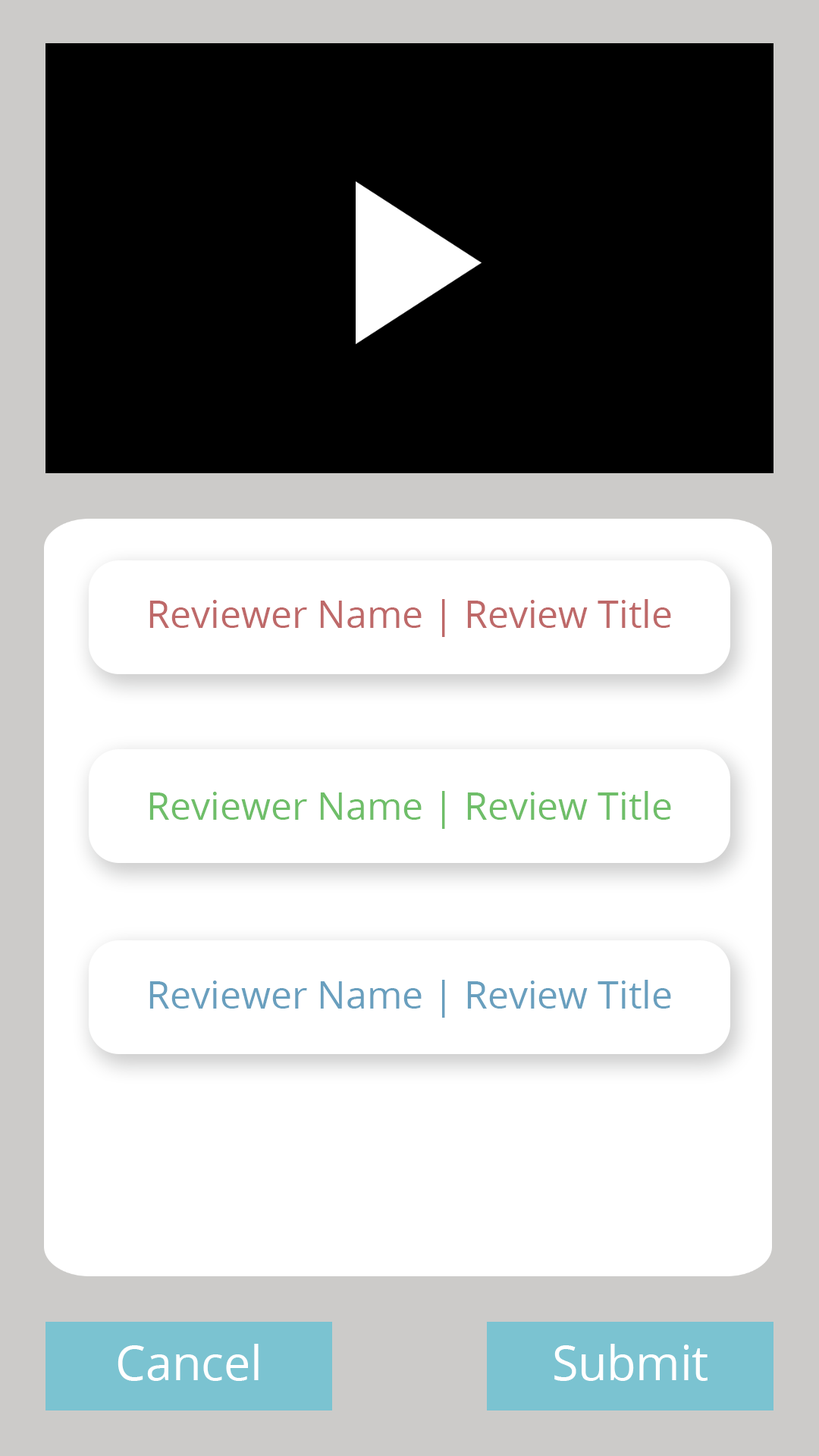
<style>
.page{position:relative;width:819px;height:1456px;background:#ffffff}
.page>*{position:absolute;margin:0}
.t1{font:37.9px "OpenSans";color:#be6969}
.t2{font:37.9px "OpenSans";color:#6fbe69}
.t3{font:37.9px "OpenSans";color:#699fbe}
.t4{font:47.4px "OpenSans";color:#ffffff}
</style>
<div class="page">
<p class="t1" style="left:149px;top:599px;width:522px;height:38px">Reviewer Name | Review Title</p>
<p class="t2" style="left:149px;top:791px;width:522px;height:38px">Reviewer Name | Review Title</p>
<p class="t3" style="left:149px;top:980px;width:522px;height:38px">Reviewer Name | Review Title</p>
<p class="t4" style="left:118px;top:1344px;width:141px;height:37px">Cancel</p>
<p class="t4" style="left:554px;top:1344px;width:154px;height:37px">Submit</p>
</div>
